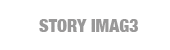
<style>
.page{position:relative;width:170px;height:50px;background:#ffffff}
.page>*{position:absolute;margin:0}
.t1{font:18px "HelveticaNeue-CondensedBlack";color:#999898}
</style>
<div class="page">
<p class="t1" style="left:39px;top:19px;width:99px;height:13px">STORY IMAG3</p>
</div>
